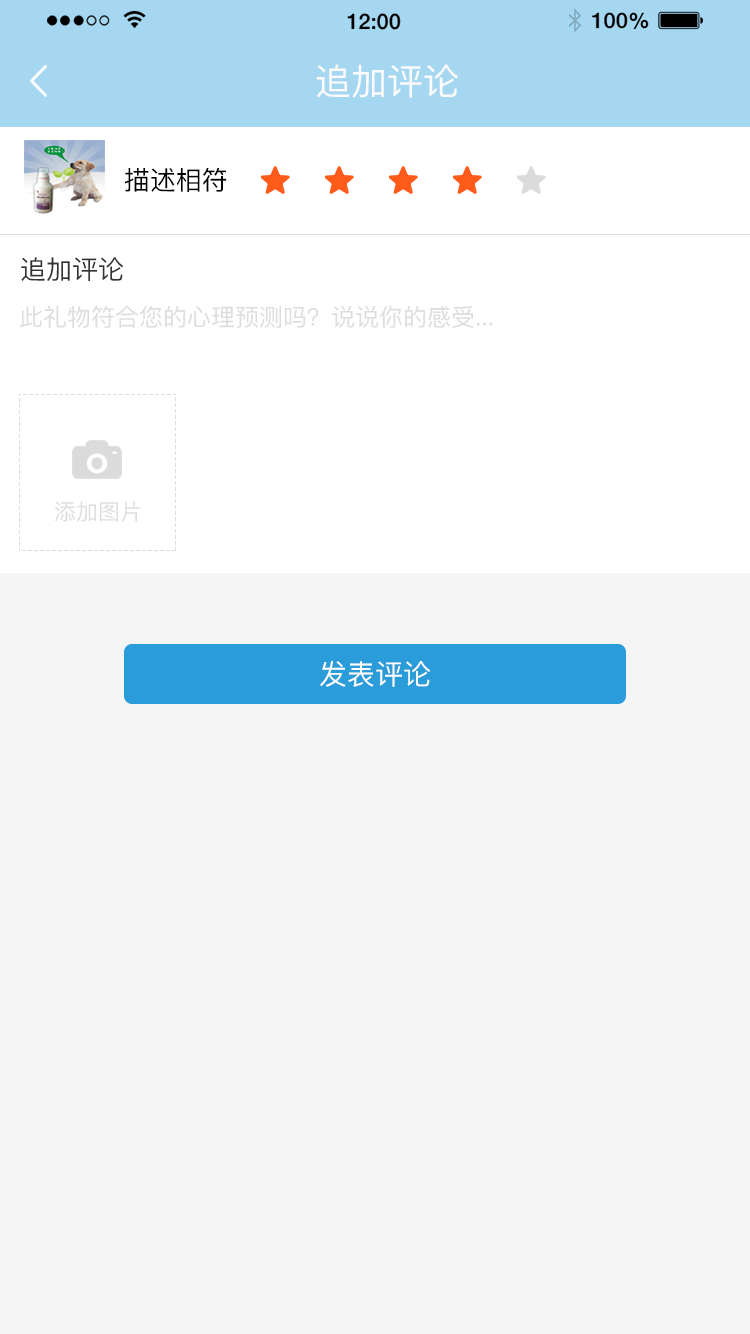
<style>
.page{position:relative;width:750px;height:1334px;background:#f5f5f5}
.page>*{position:absolute;margin:0}
.t1{font:36px "PingFangSC-Regular";color:#fcfafa}
.t2{font:26px "PingFangSC-Regular";color:#000000}
.t3{font:26px "PingFangSC-Regular";color:#333333}
.t4{font:24px "PingFangSC-Regular";color:#dddddd}
.t5{font:22px "PingFangSC-Regular";color:#dddddd}
.t6{font:28px "PingFangSC-Regular";color:#ffffff}
</style>
<div class="page">
<p class="t1" style="left:316px;top:64px;width:142px;height:34px">追加评论</p>
<p class="t2" style="left:124px;top:167px;width:103px;height:25px">描述相符</p>
<p class="t3" style="left:21px;top:257px;width:103px;height:25px">追加评论</p>
<p class="t4" style="left:19px;top:305px;width:474px;height:23px">此礼物符合您的心理预测吗？说说你的感受...</p>
<p class="t5" style="left:55px;top:501px;width:85px;height:21px">添加图片</p>
<p class="t6" style="left:320px;top:661px;width:111px;height:26px">发表评论</p>
</div>
